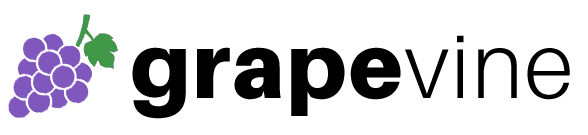
<style>
.page{position:relative;width:588px;height:135px;background:#ffffff}
.page>*{position:absolute;margin:0}
.t1{font:91.8px "Amiamie-Black";letter-spacing:0.02em;color:#000000}
.t2{font:91.8px "Amiamie-Light";letter-spacing:0.02em;color:#000000}
</style>
<div class="page">
<p class="t1" style="left:132px;top:35px;width:438px;height:84px">grape<span class="t2">vine</span></p>
</div>
